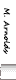
<style>
.page{position:relative;width:16px;height:80px;background:#ffffff}
.page>*{position:absolute;margin:0}
.t1{font:7.5px "SegoeScript";letter-spacing:0.05em;color:#000000;font-weight:bold;scale:0.9 1}
</style>
<div class="page">
<p class="t1" style="left:3px;top:8px;width:8px;height:46px;rotate:90deg">M. Arnolds</p>
</div>
